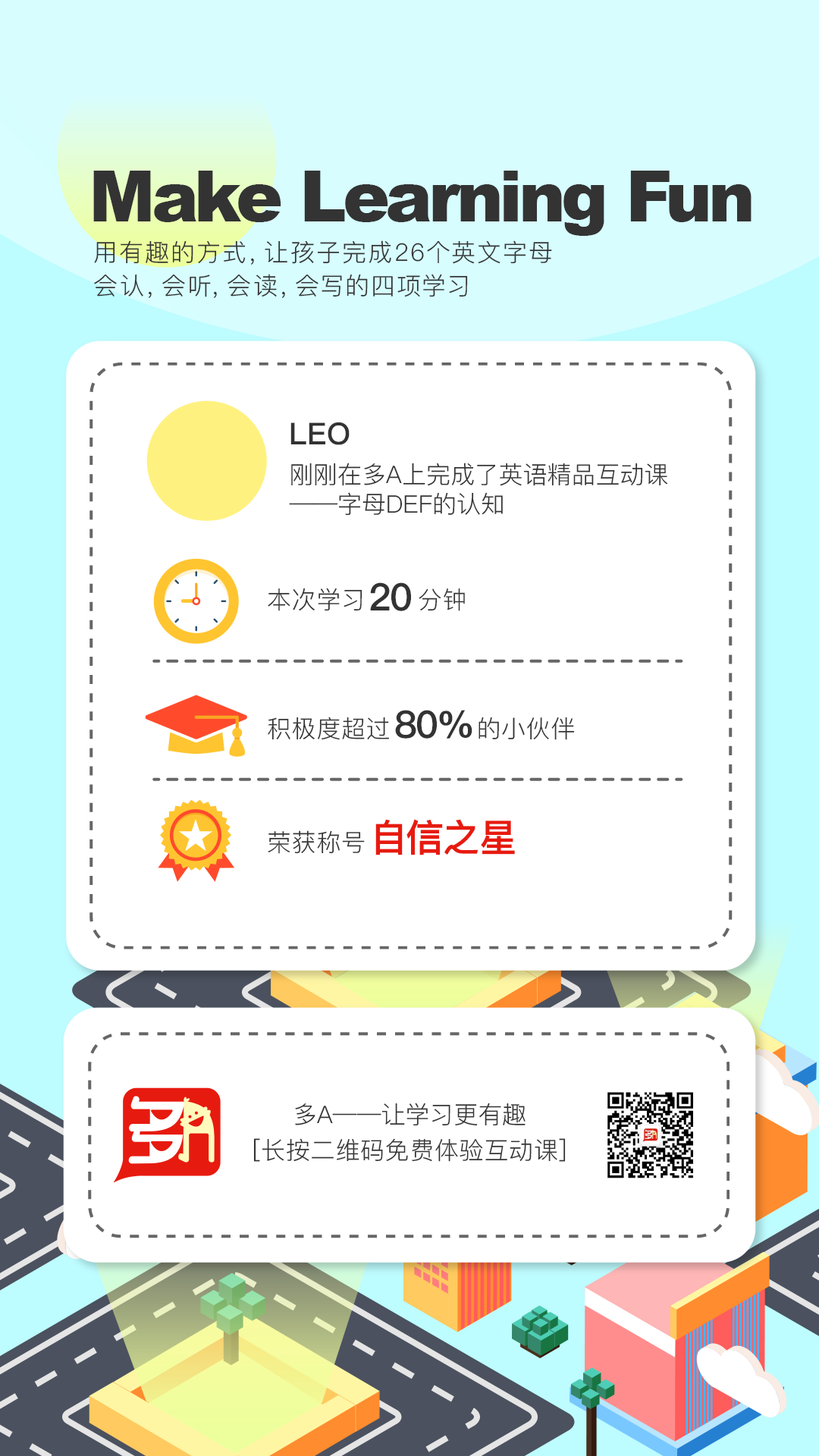
<style>
.page{position:relative;width:819px;height:1456px;background:#ffffff}
.page>*{position:absolute;margin:0}
.t1{font:70.5px "Arial-Black";letter-spacing:-0.046em;color:#333333}
.t2{font:24.3px/32.8px "PingFang-SC-Regular";letter-spacing:0.1em;color:#333333}
.t3{font:30.3px "PingFang-SC-Heavy";color:#333333}
.t4{font:24.3px "PingFang-SC-Regular";color:#333333}
.t5{font:37.9px "PingFang-SC-Heavy";letter-spacing:-0.046em;color:#333333}
.t6{font:37.9px "PingFang-SC-Heavy";letter-spacing:-0.046em;color:#e71a0f}
</style>
<div class="page">
<p class="t1" style="left:93px;top:171px;width:658px;height:65px">Make Learning Fun</p>
<p class="t2" style="left:94px;top:240px;width:458px;height:58px">用有趣的方式，让孩子完成26个英文字母<br>会认，会听，会读，会写的四项学习</p>
<p class="t3" style="left:290px;top:422px;width:60px;height:23px">LEO</p>
<p class="t4" style="left:289px;top:463px;width:379px;height:53px">刚刚在多A上完成了英语精品互动课——字母DEF的认知</p>
<p class="t4" style="left:268px;top:588px;width:94px;height:23px">本次学习</p>
<p class="t5" style="left:370px;top:582px;width:41px;height:29px">20</p>
<p class="t4" style="left:419px;top:588px;width:46px;height:23px">分钟</p>
<p class="t5" style="left:395px;top:710px;width:77px;height:29px">80%</p>
<p class="t4" style="left:268px;top:717px;width:121px;height:23px">积极度超过</p>
<p class="t4" style="left:479px;top:717px;width:96px;height:23px">的小伙伴</p>
<p class="t6" style="left:375px;top:819px;width:140px;height:36px">自信之星</p>
<p class="t4" style="left:268px;top:830px;width:97px;height:24px">荣获称号</p>
<p class="t4" style="left:295px;top:1103px;width:231px;height:23px">多A——让学习更有趣</p>
<p class="t4" style="left:253px;top:1138px;width:313px;height:24px">[长按二维码免费体验互动课]</p>
</div>
